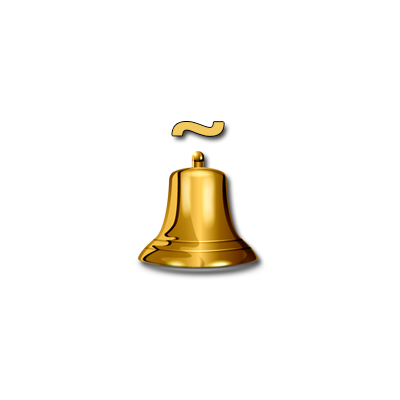
<style>
.page{position:relative;width:400px;height:400px;background:#ffffff}
.page>*{position:absolute;margin:0}
.t1{font:71.8px "MyriadPro-Bold";color:#f1c95f;scale:1.4 1}
</style>
<div class="page">
<p class="t1" style="left:172px;top:122px;width:52px;height:14px">~</p>
</div>
